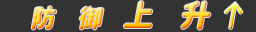
<style>
.page{position:relative;width:256px;height:32px;background:#333333}
.page>*{position:absolute;margin:0}
.t1{font:24px "JiangChengYuanTi-700W";font-style:italic}
.t2{font:30px "JiangChengYuanTi-700W";font-style:italic}
</style>
<div class="page">
<p class="t1" style="left:31px;top:6px;width:73px;height:24px">防   御</p>
<p class="t2" style="left:124px;top:1px;width:87px;height:29px">上    升</p>
</div>
